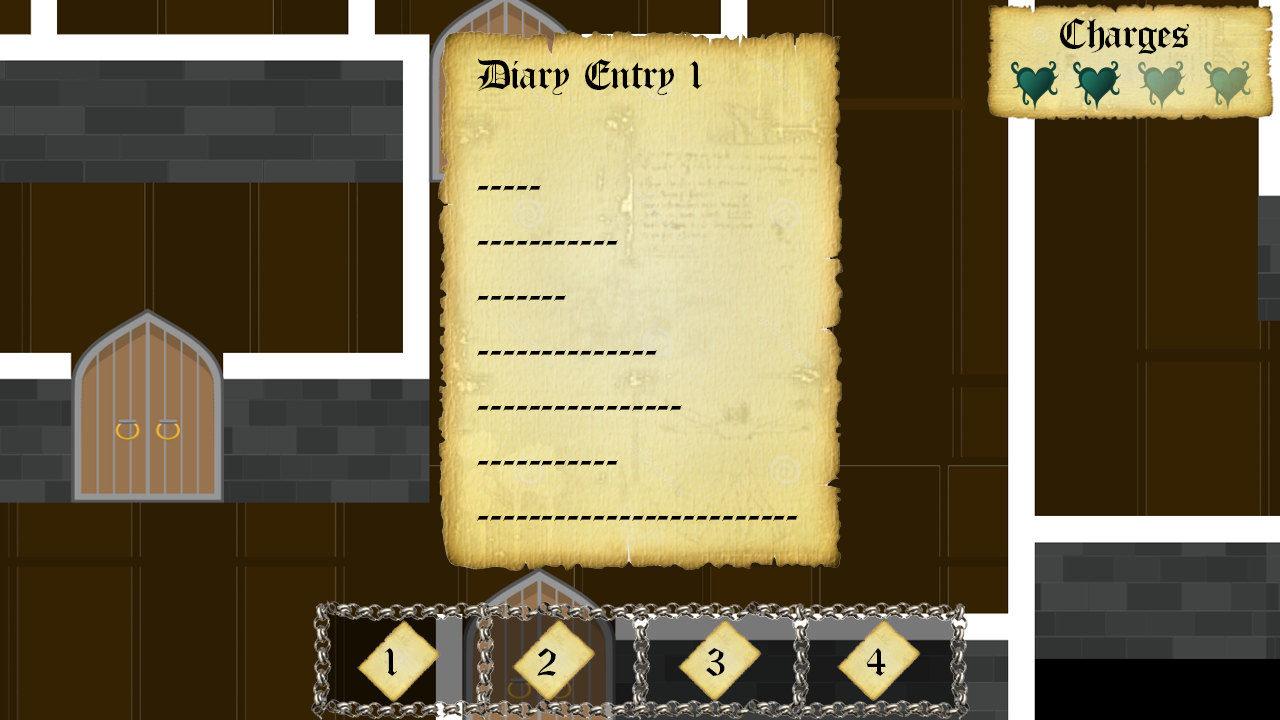
<style>
.page{position:relative;width:1280px;height:720px}
.page>*{position:absolute;margin:0}
.t1{font:45.7px "OldLondon";letter-spacing:-0.005em;color:#000000}
.t2{font:45.9px "OldLondon";letter-spacing:-0.005em;color:#000000}
</style>
<div class="page">
<p class="t1" style="left:1060px;top:18px;width:129px;height:36px">Charges</p>
<p class="t2" style="left:384px;top:648px;width:14px;height:28px">1</p>
<p class="t2" style="left:537px;top:648px;width:19px;height:28px">2</p>
<p class="t2" style="left:706px;top:648px;width:19px;height:28px">3</p>
<p class="t2" style="left:866px;top:648px;width:20px;height:28px">4</p>
</div>
